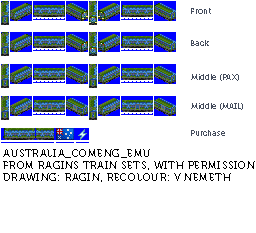
<style>
.page{position:relative;width:256px;height:233px;background:#ffffff}
.page>*{position:absolute;margin:0}
.t1{font:8px "Museo700-Regular";color:#444c5c}
.t2{font:10px "Museo700-Regular";letter-spacing:0.075em;color:#000000;text-transform:uppercase}
</style>
<div class="page">
<p class="t1" style="left:191px;top:8px;width:20px;height:6px">Front</p>
<p class="t1" style="left:191px;top:40px;width:18px;height:6px">Back</p>
<p class="t1" style="left:191px;top:74px;width:48px;height:7px">Middle (PAX)</p>
<p class="t1" style="left:191px;top:103px;width:52px;height:7px">Middle (MAIL)</p>
<p class="t1" style="left:191px;top:130px;width:34px;height:6px">Purchase</p>
<p class="t2" style="left:3px;top:149px;width:254px;height:33px">Australia_Comeng_EMU<br>From Ragins Train Sets, with permission.<br>Drawing: Ragin, recolour: V Nemeth</p>
</div>
